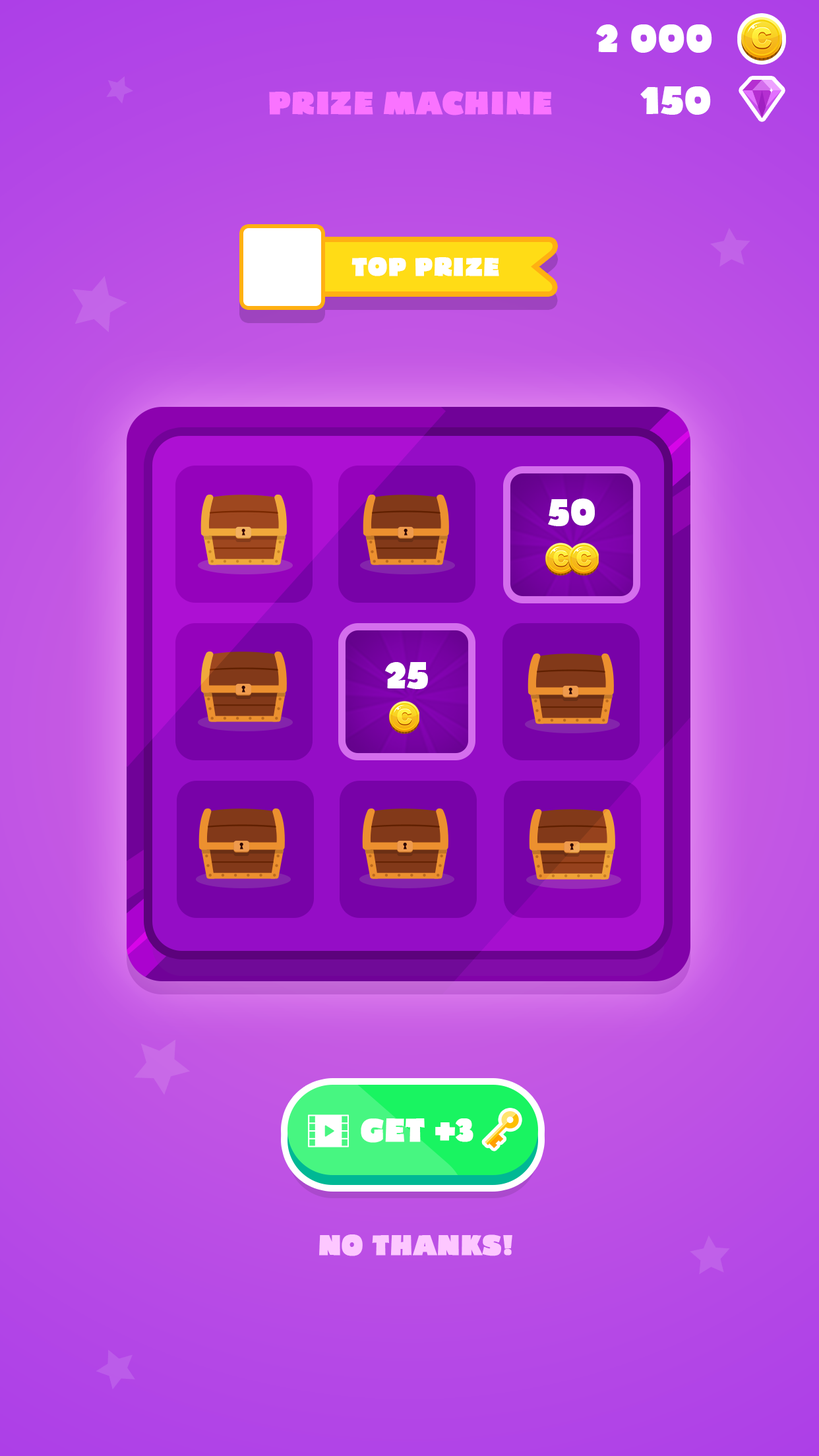
<style>
.page{position:relative;width:819px;height:1456px}
.page>*{position:absolute;margin:0}
.t1{font:37.5px "Bumpo";color:#ffffff}
.t2{font:30.7px "Bumpo";color:#fa73ff;font-weight:bold}
.t3{font:24.6px "Bumpo";color:#ffffff;font-weight:bold}
.t4{font:35.8px "Bumpo";color:#ffffff}
.t5{font:30.7px "Bumpo";color:#ffffff;font-weight:bold}
.t6{font:26.9px "Bumpo";color:#fdc7ff;font-weight:bold}
</style>
<div class="page">
<p class="t1" style="left:596px;top:24px;width:116px;height:29px">2 000</p>
<p class="t1" style="left:640px;top:86px;width:71px;height:29px">150</p>
<p class="t2" style="left:269px;top:91px;width:283px;height:24px">PRIZE MACHINE</p>
<p class="t3" style="left:351px;top:257px;width:148px;height:19px">TOP PRIZE</p>
<p class="t4" style="left:548px;top:499px;width:47px;height:27px">50</p>
<p class="t4" style="left:385px;top:662px;width:43px;height:27px">25</p>
<p class="t5" style="left:361px;top:1118px;width:112px;height:25px">GET +3</p>
<p class="t6" style="left:319px;top:1234px;width:193px;height:22px">NO THANKS!</p>
</div>
